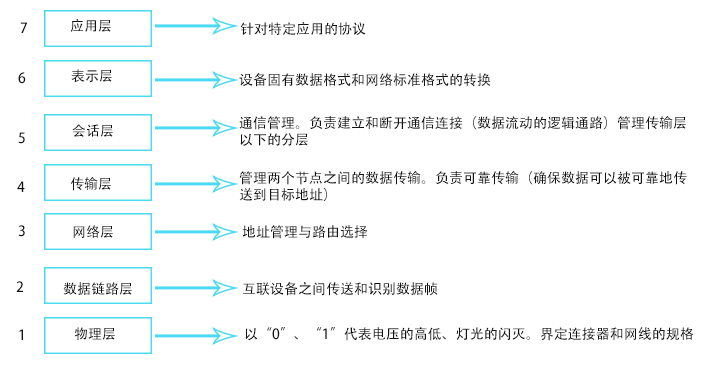
<style>
.page{position:relative;width:709px;height:372px;background:#ffffff}
.page>*{position:absolute;margin:0}
.t1{font:14px "AdobeHeitiStd-Regular";color:#141212}
</style>
<div class="page">
<p class="t1" style="left:20px;top:22px;width:7px;height:11px">7</p>
<p class="t1" style="left:70px;top:19px;width:41px;height:13px">应用层</p>
<p class="t1" style="left:240px;top:22px;width:126px;height:13px">针对特定应用的协议</p>
<p class="t1" style="left:18px;top:72px;width:8px;height:12px">6</p>
<p class="t1" style="left:71px;top:69px;width:41px;height:14px">表示层</p>
<p class="t1" style="left:239px;top:73px;width:252px;height:14px">设备固有数据格式和网络标准格式的转换</p>
<p class="t1" style="left:72px;top:124px;width:41px;height:13px">会话层</p>
<p class="t1" style="left:239px;top:116px;width:447px;height:30px">通信管理。负责建立和断开通信连接（数据流动的逻辑通路）管理传输层<br>以下的分层</p>
<p class="t1" style="left:18px;top:132px;width:7px;height:12px">5</p>
<p class="t1" style="left:239px;top:171px;width:448px;height:30px">管理两个节点之间的数据传输。负责可靠传输（确保数据可以被可靠地传<br>送到目标地址）</p>
<p class="t1" style="left:17px;top:181px;width:8px;height:11px">4</p>
<p class="t1" style="left:70px;top:177px;width:41px;height:14px">传输层</p>
<p class="t1" style="left:18px;top:225px;width:7px;height:12px">3</p>
<p class="t1" style="left:73px;top:225px;width:40px;height:13px">网络层</p>
<p class="t1" style="left:242px;top:225px;width:126px;height:14px">地址管理与路由选择</p>
<p class="t1" style="left:16px;top:281px;width:7px;height:11px">2</p>
<p class="t1" style="left:63px;top:282px;width:69px;height:13px">数据链路层</p>
<p class="t1" style="left:243px;top:282px;width:195px;height:14px">互联设备之间传送和识别数据帧</p>
<p class="t1" style="left:19px;top:329px;width:4px;height:11px">1</p>
<p class="t1" style="left:74px;top:327px;width:41px;height:13px">物理层</p>
<p class="t1" style="left:245px;top:327px;width:448px;height:14px">以“0”、“1”代表电压的高低、灯光的闪灭。界定连接器和网线的规格</p>
</div>
